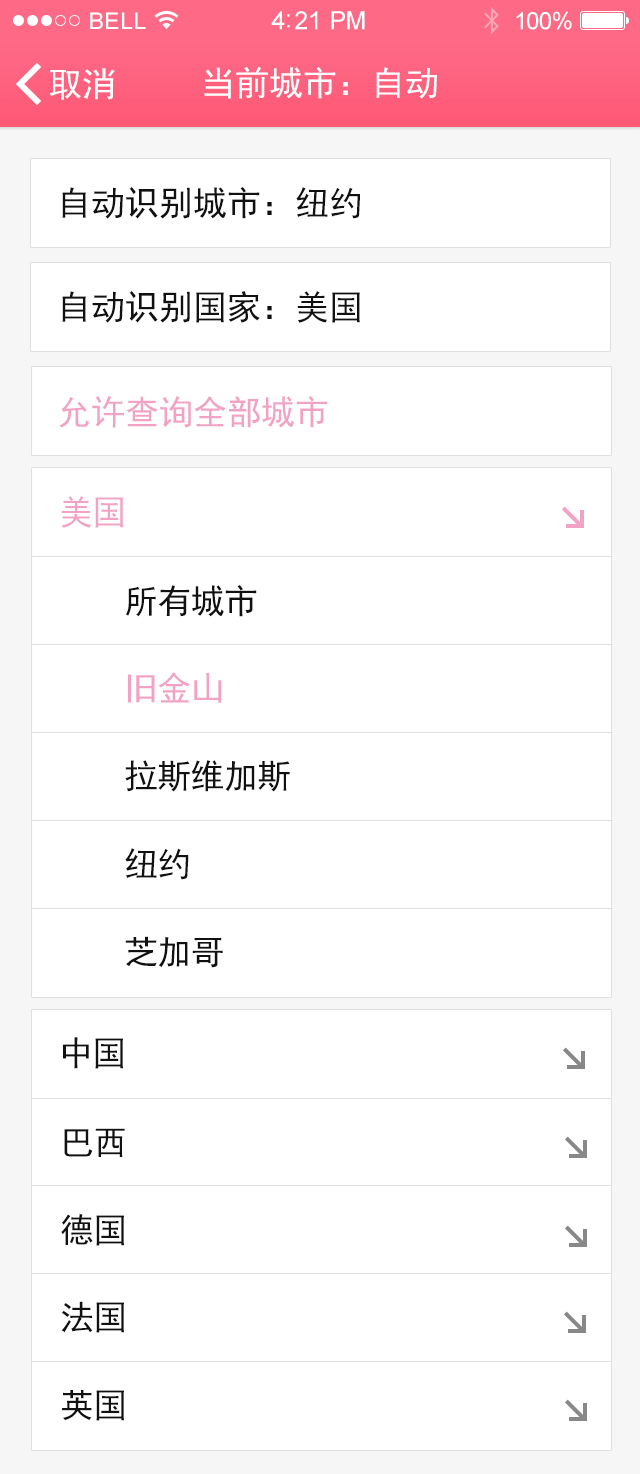
<style>
.page{position:relative;width:640px;height:1474px;background:#ffffff}
.page>*{position:absolute;margin:0}
.t1{font:23px "ArialMT";letter-spacing:0.02em;color:#ffffff}
.t2{font:25px "ArialMT";letter-spacing:-0.02em;color:#ffffff}
.t3{font:24px "ArialMT";letter-spacing:-0.02em;color:#ffffff}
.t4{font:34px "SimHei";color:#ffffff}
.t5{font:34px "SimHei";color:#111111}
.t6{font:34px "SimHei";color:#f2a2c5}
.t7{font:34px "SimHei";letter-spacing:-0.02em;color:#f2a2c5}
.t8{font:34px "SimHei";letter-spacing:-0.02em;color:#111111}
</style>
<div class="page">
<p class="t1" style="left:90px;top:12px;width:56px;height:17px">BELL</p>
<p class="t2" style="left:271px;top:11px;width:94px;height:19px">4:21 PM</p>
<p class="t3" style="left:516px;top:11px;width:56px;height:19px">100%</p>
<p class="t4" style="left:50px;top:68px;width:65px;height:32px">取消</p>
<p class="t4" style="left:204px;top:66px;width:233px;height:33px">当前城市：自动</p>
<p class="t5" style="left:62px;top:187px;width:298px;height:32px">自动识别城市：纽约</p>
<p class="t5" style="left:62px;top:291px;width:298px;height:32px">自动识别国家：美国</p>
<p class="t6" style="left:59px;top:396px;width:269px;height:32px">允许查询全部城市</p>
<p class="t7" style="left:61px;top:496px;width:62px;height:32px">美国</p>
<p class="t8" style="left:125px;top:585px;width:132px;height:32px">所有城市</p>
<p class="t7" style="left:127px;top:672px;width:95px;height:31px">旧金山</p>
<p class="t8" style="left:125px;top:760px;width:165px;height:32px">拉斯维加斯</p>
<p class="t8" style="left:125px;top:848px;width:64px;height:32px">纽约</p>
<p class="t8" style="left:125px;top:936px;width:98px;height:32px">芝加哥</p>
<p class="t8" style="left:63px;top:1037px;width:60px;height:32px">中国</p>
<p class="t8" style="left:64px;top:1128px;width:61px;height:29px">巴西</p>
<p class="t8" style="left:61px;top:1214px;width:63px;height:32px">德国</p>
<p class="t8" style="left:61px;top:1301px;width:63px;height:32px">法国</p>
<p class="t8" style="left:62px;top:1390px;width:62px;height:31px">英国</p>
</div>
